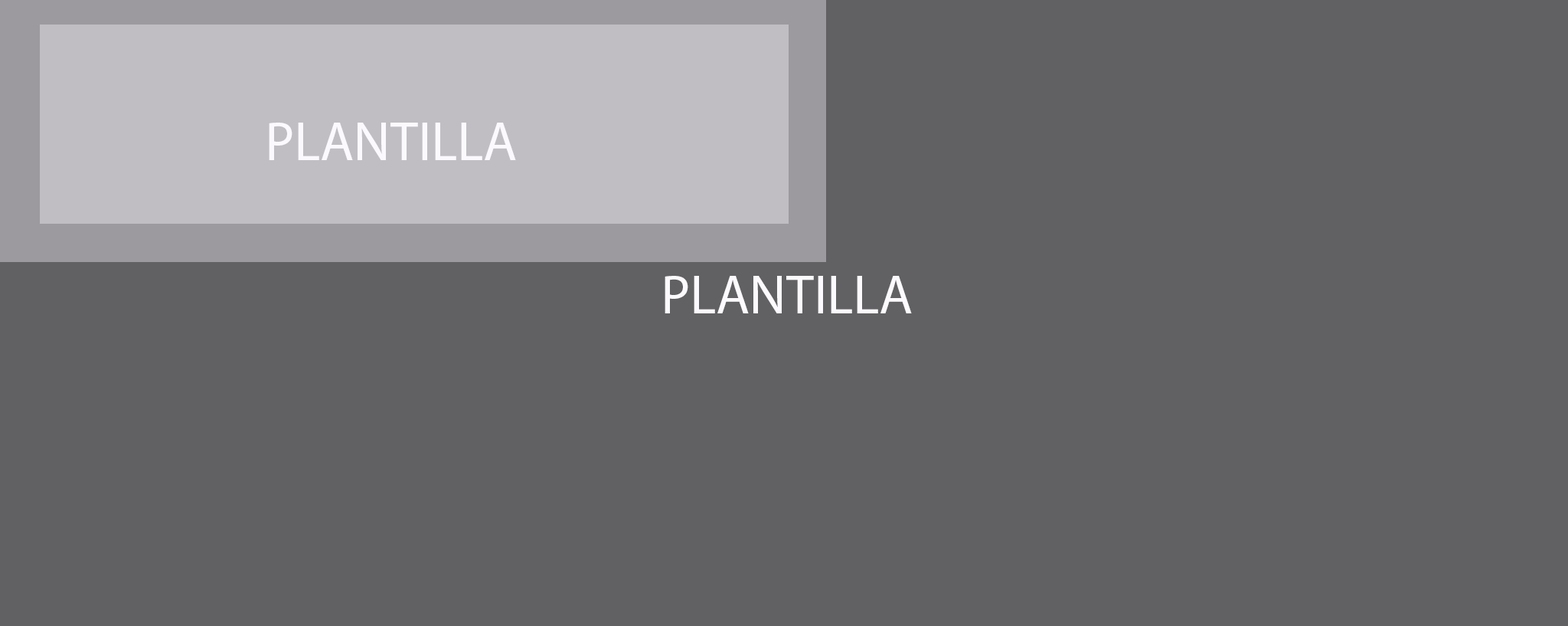
<style>
.page{position:relative;width:1568px;height:626px;background:#616062}
.page>*{position:absolute;margin:0}
.t1{font:55.1px "MyriadPro-Regular";color:#fcfaff}
</style>
<div class="page">
<p class="t1" style="left:269px;top:122px;width:247px;height:38px">PLANTILLA</p>
<p class="t1" style="left:665px;top:276px;width:247px;height:37px">PLANTILLA</p>
</div>
